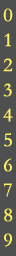
<style>
.page{position:relative;width:16px;height:256px;background:#4e5050}
.page>*{position:absolute;margin:0}
.t1{font:20px/25px "Garamond";color:#ffee5f;font-weight:bold}
</style>
<div class="page">
<p class="t1" style="left:3px;top:8px;width:10px;height:239px">0<br>1<br>2<br>3<br>4<br>5<br>6<br>7<br>8<br>9</p>
</div>
